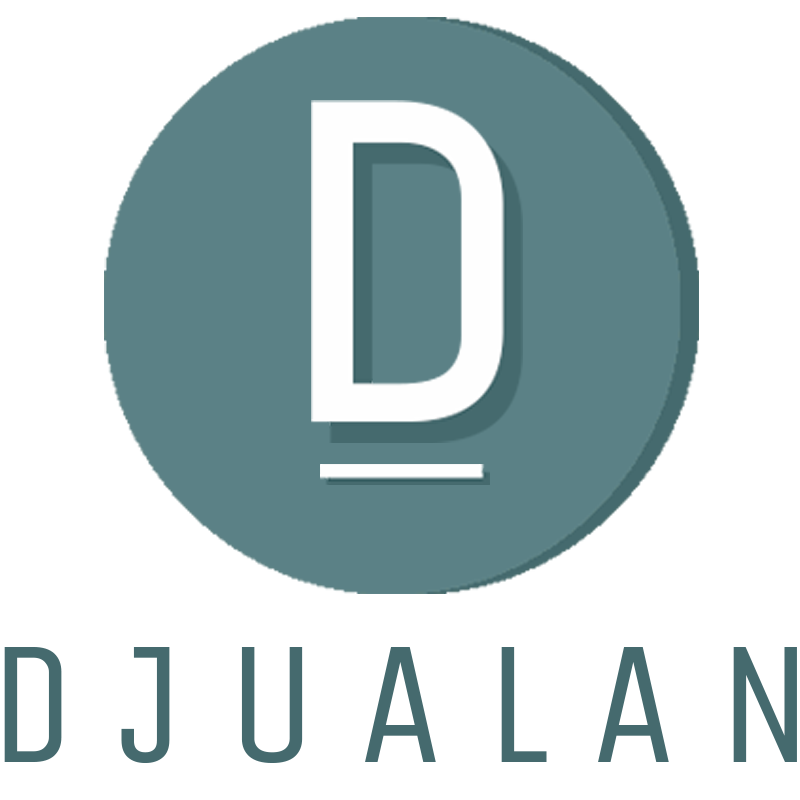
<style>
.page{position:relative;width:800px;height:800px;background:#ffffff}
.page>*{position:absolute;margin:0}
.t1{font:177.5px "UnicaOne-Regular";color:#456a6e}
</style>
<div class="page">
<p class="t1" style="left:4px;top:647px;width:793px;height:116px">D J U A L A N</p>
</div>
